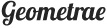
<style>
.page{position:relative;width:107px;height:28px;background:#ffffff}
.page>*{position:absolute;margin:0}
.t1{font:26px "LobsterTwo-BoldItalic";color:#252525}
.t2{font:26px "LobsterTwo-BoldItalic";letter-spacing:-0.05em;color:#252525}
</style>
<div class="page">
<p class="t1" style="left:1px;top:0px;width:105px;height:26px">Geomet<span class="t2">r</span>ae</p>
</div>
